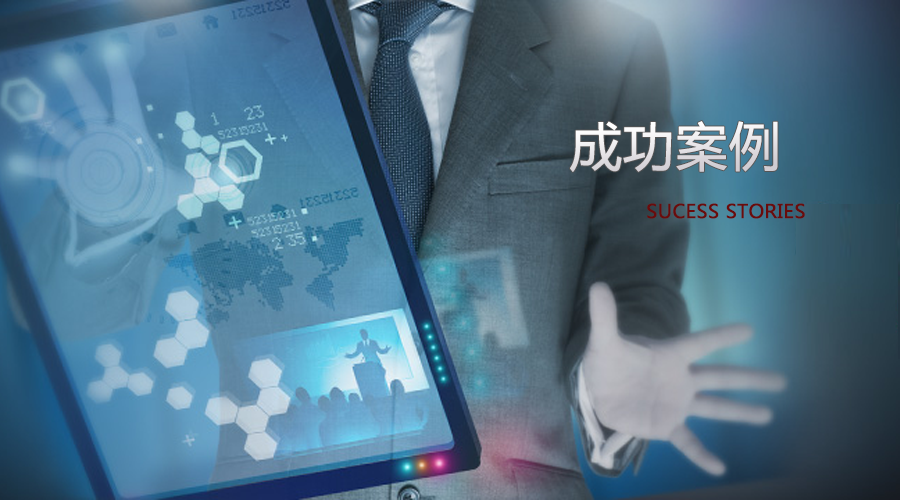
<style>
.page{position:relative;width:900px;height:500px}
.page>*{position:absolute;margin:0}
.t1{font:51.5px "MicrosoftYaHei";color:#e7e4e8;font-weight:bold}
.t2{font:19px "MicrosoftYaHei";color:#690c0c;font-weight:bold}
</style>
<div class="page">
<p class="t1" style="left:570px;top:121px;width:208px;height:51px">成功案例</p>
<p class="t2" style="left:647px;top:203px;width:158px;height:16px">SUCESS STORIES</p>
</div>
